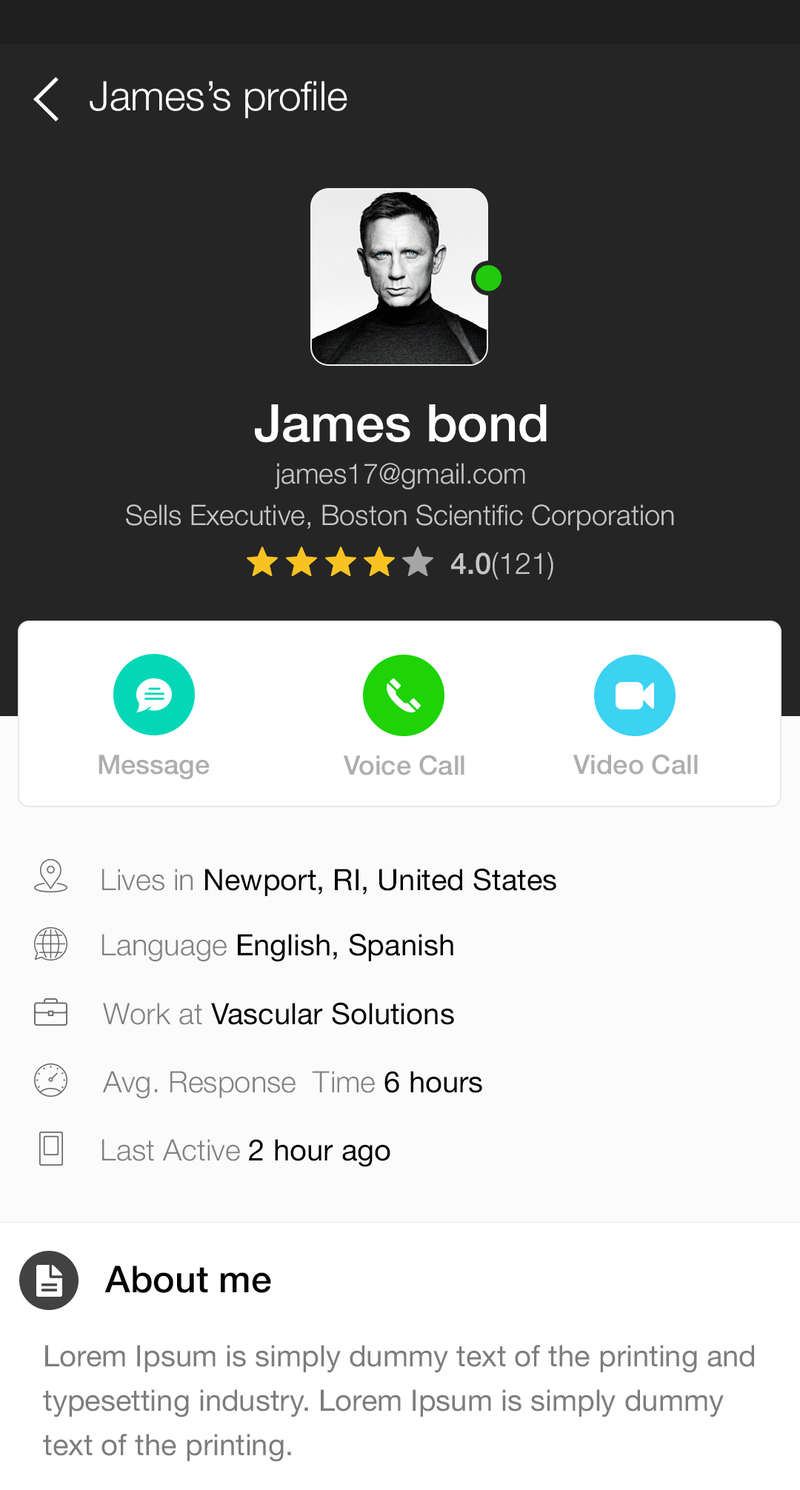
<style>
.page{position:relative;width:800px;height:1490px;background:#252525}
.page>*{position:absolute;margin:0}
.t1{font:40.7px "HelveticaNeue-Light";color:#ffffff}
.t2{font:51.9px "HelveticaNeue-Medium";color:#ffffff}
.t3{font:28.1px "HelveticaNeue-Light";color:#c5c5c5}
.t4{font:29.6px "HelveticaNeue-Light";color:#c5c5c5}
.t5{font:29.6px "HelveticaNeue-Medium";color:#c5c5c5}
.t6{font:26.7px "HelveticaNeue-Medium";color:#aeaeae}
.t7{font:29.6px "HelveticaNeue";color:#000000}
.t8{font:29.6px "HelveticaNeue-Light";color:#828282}
.t9{font:37px "HelveticaNeue-Medium";color:#030303}
.t10{font:29.6px/44.4px "HelveticaNeue";color:#7d7d7d}
</style>
<div class="page">
<p class="t1" style="left:90px;top:81px;width:257px;height:38px">James’s profile</p>
<p class="t2" style="left:255px;top:404px;width:292px;height:39px">James bond</p>
<p class="t3" style="left:275px;top:463px;width:250px;height:27px">james17@gmail.com</p>
<p class="t3" style="left:126px;top:504px;width:548px;height:27px">Sells Executive, Boston Scientific Corporation</p>
<p class="t4" style="left:451px;top:552px;width:102px;height:28px"><span class="t5">4.0</span>(121)</p>
<p class="t6" style="left:99px;top:755px;width:111px;height:25px">Message</p>
<p class="t6" style="left:343px;top:755px;width:121px;height:21px">Voice Call</p>
<p class="t6" style="left:573px;top:754px;width:125px;height:21px">Video Call</p>
<p class="t7" style="left:102px;top:868px;width:454px;height:28px"><span class="t8">Lives in </span>Newport, RI, United States</p>
<p class="t7" style="left:102px;top:933px;width:351px;height:29px"><span class="t8">Language </span>English, Spanish</p>
<p class="t7" style="left:103px;top:1002px;width:351px;height:23px"><span class="t8">Work at </span>Vascular Solutions</p>
<p class="t8" style="left:102px;top:1071px;width:380px;height:28px">Avg. Response  Time <span class="t7">6 hours</span></p>
<p class="t8" style="left:102px;top:1139px;width:288px;height:28px">Last Active <span class="t7">2 hour ago</span></p>
<p class="t9" style="left:104px;top:1266px;width:167px;height:27px">About me</p>
<p class="t10" style="left:43px;top:1345px;width:711px;height:117px">Lorem Ipsum is simply dummy text of the printing and typesetting industry. Lorem Ipsum is simply dummy text of the printing.</p>
</div>
